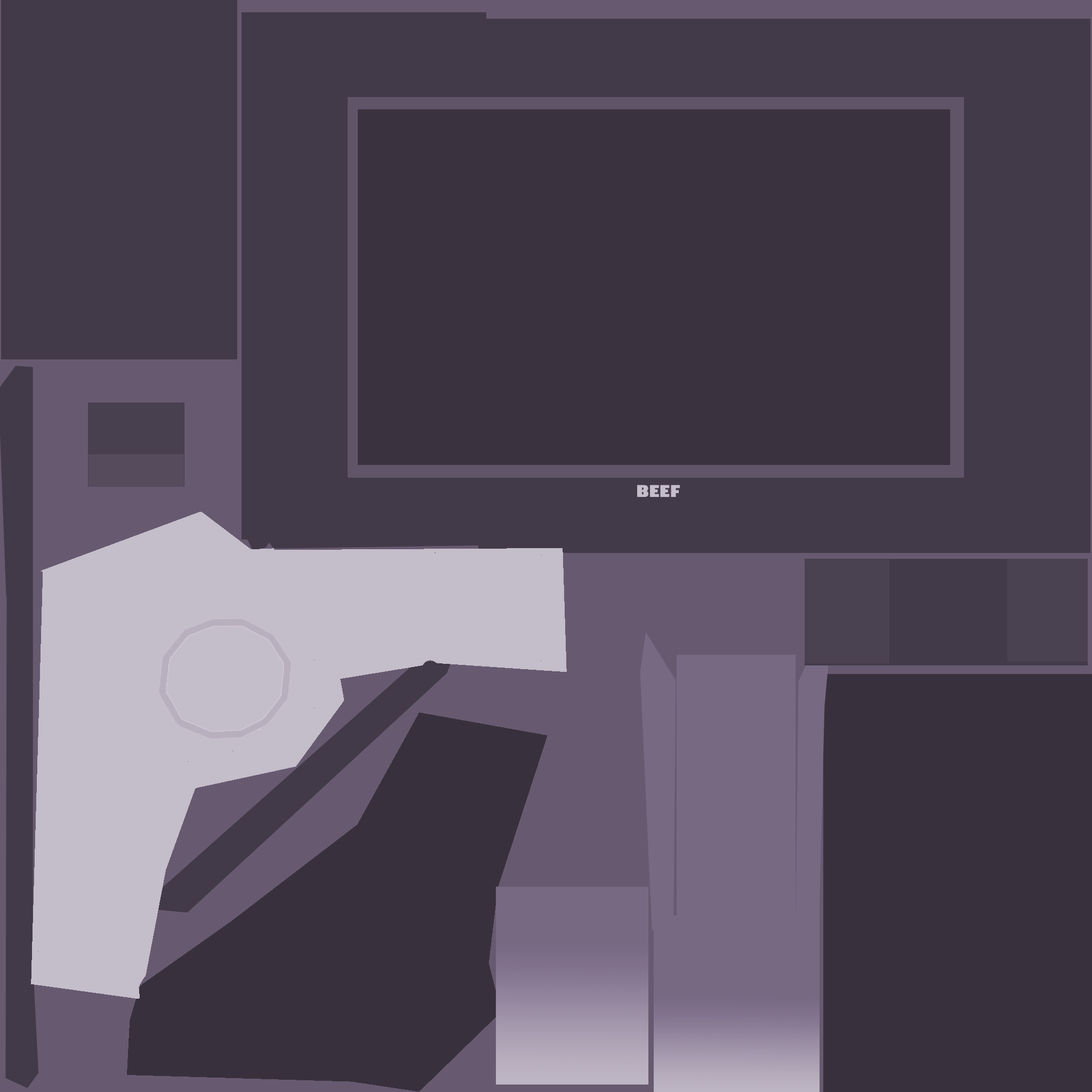
<style>
.page{position:relative;width:1092px;height:1092px;background:#423a48}
.page>*{position:absolute;margin:0}
.t1{font:16px "GillSans-UltraBold";letter-spacing:0.01em;color:#c3c3c3;scale:0.9 1}
</style>
<div class="page">
<p class="t1" style="left:637px;top:485px;width:43px;height:12px">BEEF</p>
</div>
